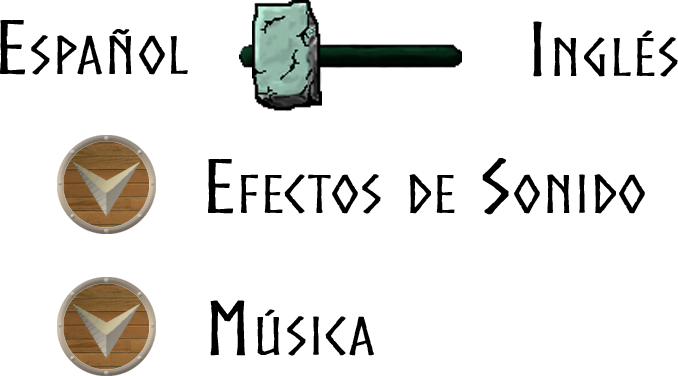
<style>
.page{position:relative;width:678px;height:376px;background:#ffffff}
.page>*{position:absolute;margin:0}
.t1{font:72px "Norse";color:#000000;font-variant:small-caps;font-weight:bold;scale:1.3 1}
</style>
<div class="page">
<p class="t1" style="left:0px;top:20px;width:188px;height:55px">Español</p>
<p class="t1" style="left:533px;top:21px;width:145px;height:56px">Inglés</p>
<p class="t1" style="left:208px;top:158px;width:437px;height:57px">Efectos de Sonido</p>
<p class="t1" style="left:210px;top:300px;width:164px;height:56px">Música</p>
</div>
